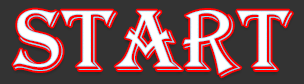
<style>
.page{position:relative;width:304px;height:84px;background:#333333}
.page>*{position:absolute;margin:0}
.t1{font:88.9px "Algerian";color:#ffffff}
</style>
<div class="page">
<p class="t1" style="left:13px;top:9px;width:279px;height:68px">START</p>
</div>
